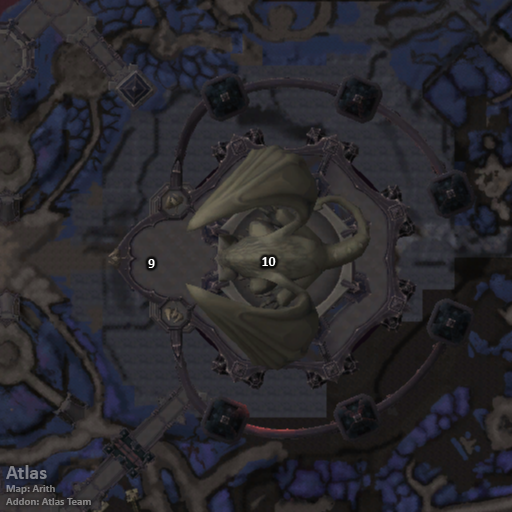
<style>
.page{position:relative;width:512px;height:512px}
.page>*{position:absolute;margin:0}
.t1{font:14px "Calibri-Bold";color:#ffffff}
.t2{font:11px "Calibri-Bold";color:#808287}
.t3{font:20px "Calibri-Bold";color:#808287}
</style>
<div class="page">
<p class="t1" style="left:262px;top:257px;width:14px;height:9px">10</p>
<p class="t1" style="left:148px;top:259px;width:7px;height:9px">9</p>
<p class="t2" style="left:6px;top:465px;width:85px;height:40px"><span class="t3">Atlas<br></span>Map: Arith<br>Addon: Atlas Team</p>
</div>
